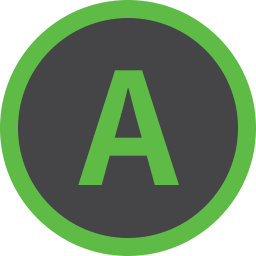
<style>
.page{position:relative;width:256px;height:256px;background:#454446}
.page>*{position:absolute;margin:0}
.t1{font:154.8px "SpoqaHanSansNeo-Bold";letter-spacing:-0.035em;color:#5ebb46}
</style>
<div class="page">
<p class="t1" style="left:78px;top:70px;width:101px;height:115px">A</p>
</div>
